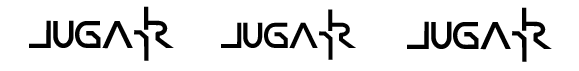
<style>
.page{position:relative;width:579px;height:71px;background:#ffffff}
.page>*{position:absolute;margin:0}
.t1{font:50.5px "horizon";letter-spacing:-0.04em;color:#010101}
.t2{font:47px "horizon";letter-spacing:-0.04em;color:#010101}
</style>
<div class="page">
<p class="t1" style="left:29px;top:6px;width:145px;height:55px">JUGAR</p>
<p class="t2" style="left:221px;top:9px;width:135px;height:51px">JUGAR</p>
<p class="t1" style="left:407px;top:7px;width:145px;height:55px">JUGAR</p>
</div>
